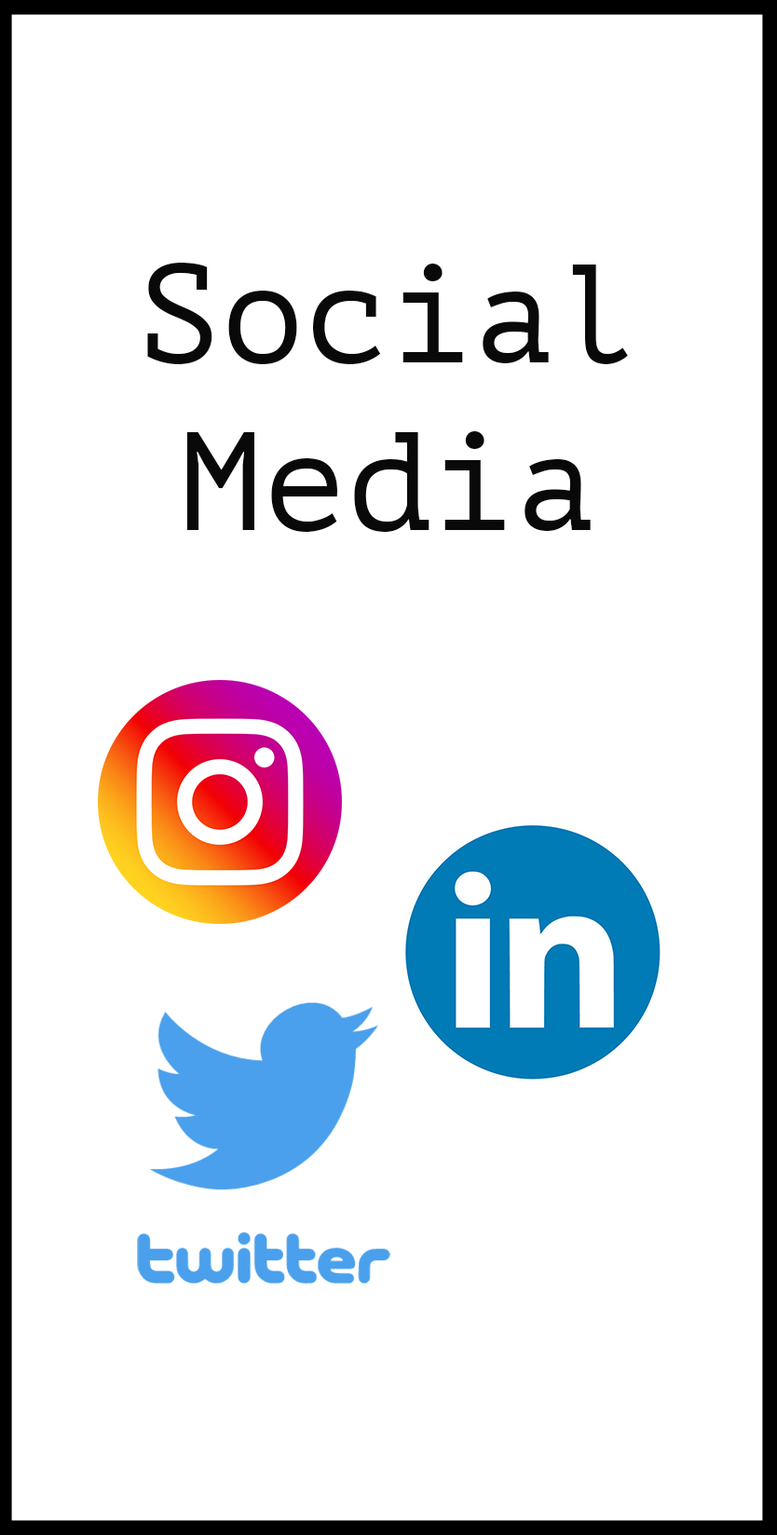
<style>
.page{position:relative;width:777px;height:1535px;background:#ffffff}
.page>*{position:absolute;margin:0}
.t1{font:139.7px "PTMono-Regular";color:#090909}
</style>
<div class="page">
<p class="t1" style="left:147px;top:263px;width:481px;height:269px;text-align:center">Social<br>Media</p>
</div>
